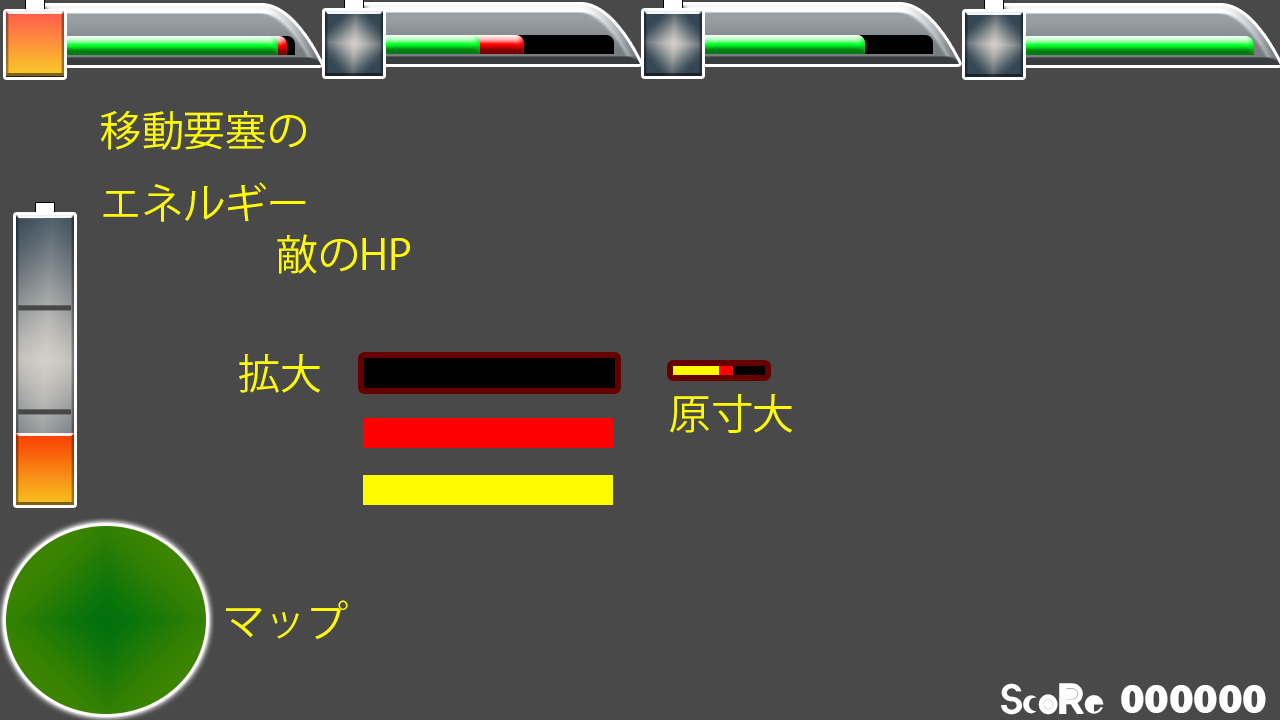
<style>
.page{position:relative;width:1280px;height:720px;background:#494949}
.page>*{position:absolute;margin:0}
.t1{font:41.7px "KozGoPr6N-Regular";color:#fffb00}
.t2{font:69.6px "KozGoPr6N-Regular";color:#474747;scale:0.91 1}
.t3{font:41.7px "pigmo-00";color:#ffffff}
.t4{font:41.7px "FranklinGothic-Heavy";color:#ffffff}
</style>
<div class="page">
<p class="t1" style="left:101px;top:110px;width:205px;height:112px">移動要塞の<br>エネルギー</p>
<p class="t1" style="left:277px;top:234px;width:133px;height:40px">敵のHP</p>
<p class="t2" style="left:18px;top:305px;width:53px;height:110px;rotate:90deg">I      I</p>
<p class="t1" style="left:239px;top:354px;width:82px;height:39px">拡大</p>
<p class="t1" style="left:670px;top:394px;width:123px;height:39px">原寸大</p>
<p class="t1" style="left:226px;top:600px;width:122px;height:40px">マップ</p>
<p class="t3" style="left:1001px;top:683px;width:103px;height:32px">ScoRe</p>
<p class="t4" style="left:1121px;top:685px;width:145px;height:28px">000000</p>
</div>
